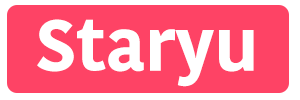
<style>
.page{position:relative;width:300px;height:100px;background:#fe4365}
.page>*{position:absolute;margin:0}
.t1{font:72px "KohinoorDevanagari-Bold";color:#ffffff}
</style>
<div class="page">
<p class="t1" style="left:37px;top:19px;width:217px;height:68px">Staryu</p>
</div>
